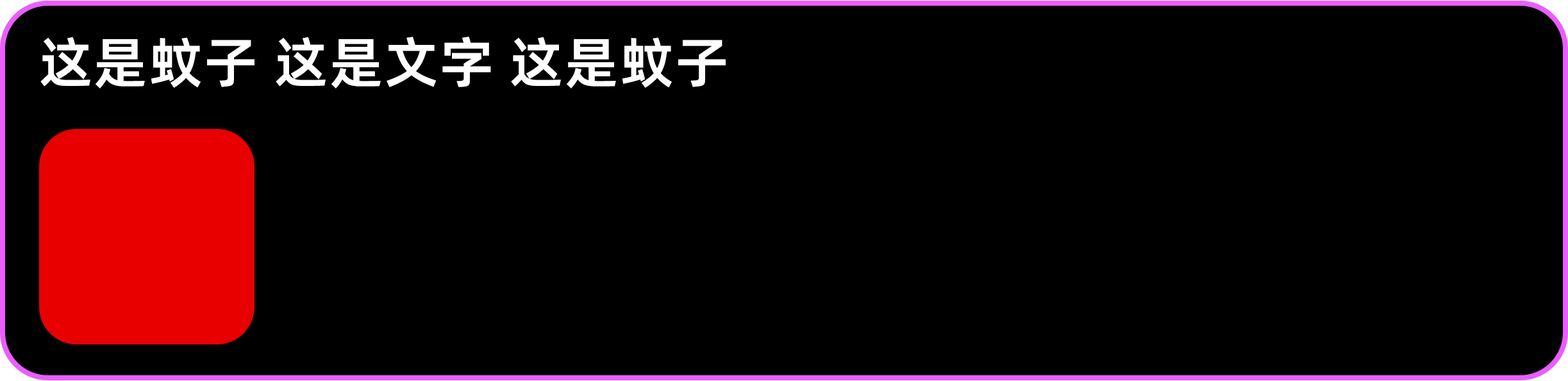
<style>
.page{position:relative;width:1568px;height:381px;background:#000000}
.page>*{position:absolute;margin:0}
.t1{font:54.8px "AlibabaPuHuiTi_3_85_Bold";letter-spacing:0.02em;color:#ffffff}
</style>
<div class="page">
<p class="t1" style="left:40px;top:37px;width:686px;height:51px">这是蚊子 这是文字 这是蚊子</p>
</div>
